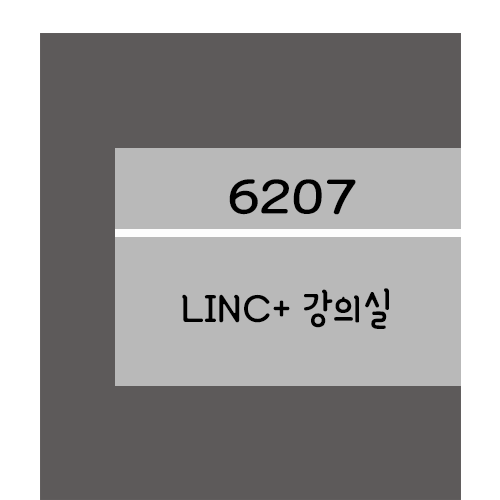
<style>
.page{position:relative;width:500px;height:500px;background:#5d5a5a}
.page>*{position:absolute;margin:0}
.t1{font:61.2px "YanoljaYacheR";color:#000000;scale:1.18 1}
.t2{font:48px "YanoljaYacheR";color:#000000}
</style>
<div class="page">
<p class="t1" style="left:229px;top:179px;width:127px;height:36px">6207</p>
<p class="t2" style="left:182px;top:288px;width:207px;height:41px">LINC+ 강의실</p>
</div>
